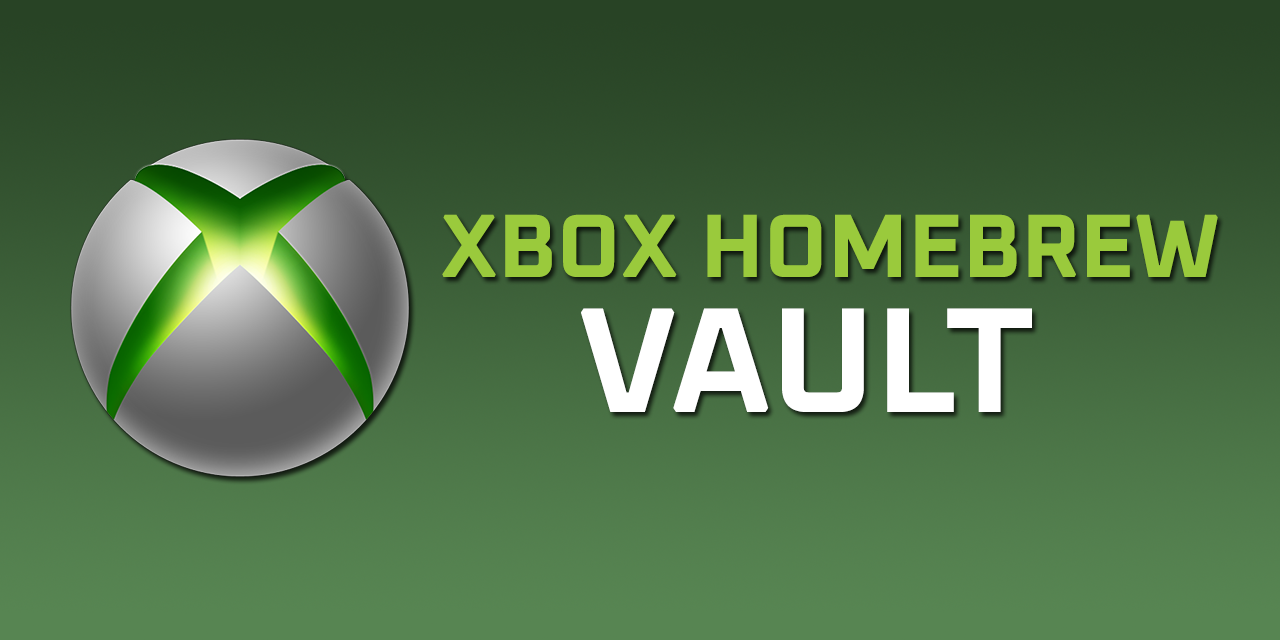
<style>
.page{position:relative;width:1280px;height:640px}
.page>*{position:absolute;margin:0}
.t1{font:90px "Oxanium-Bold";color:#9aca3c}
.t2{font:150px "Oxanium-Bold";color:#ffffff}
</style>
<div class="page">
<p class="t1" style="left:442px;top:214px;width:776px;height:63px">XBOX HOMEBREW</p>
<p class="t2" style="left:581px;top:308px;width:451px;height:104px">VAULT</p>
</div>
